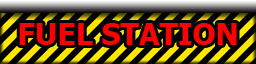
<style>
.page{position:relative;width:256px;height:64px;background:#000000}
.page>*{position:absolute;margin:0}
.t1{font:30px "Tahoma-Bold";color:#fe0000}
</style>
<div class="page">
<p class="t1" style="left:19px;top:23px;width:218px;height:22px">FUEL STATION</p>
</div>
